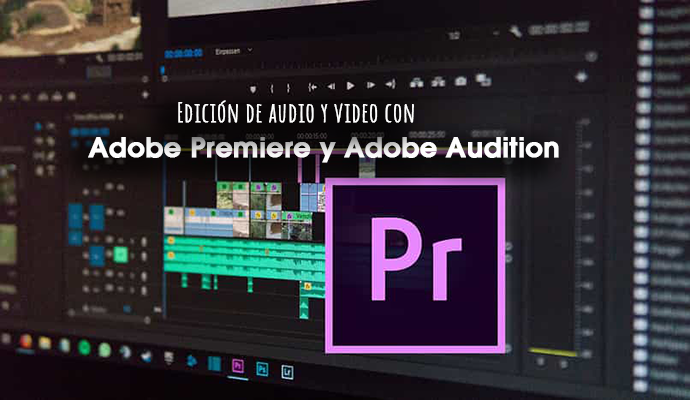
<style>
.page{position:relative;width:690px;height:400px}
.page>*{position:absolute;margin:0}
.t1{font:26.9px "AmaticSC-Regular";color:#ffffff;font-weight:bold}
.t2{font:26.9px "AvantGarde-Demi";color:#ffffff;font-weight:bold}
</style>
<div class="page">
<p class="t1" style="left:178px;top:100px;width:236px;height:23px">Edición de audio y video con</p>
<p class="t2" style="left:88px;top:137px;width:471px;height:26px">Adobe Premiere y Adobe Audition</p>
</div>
